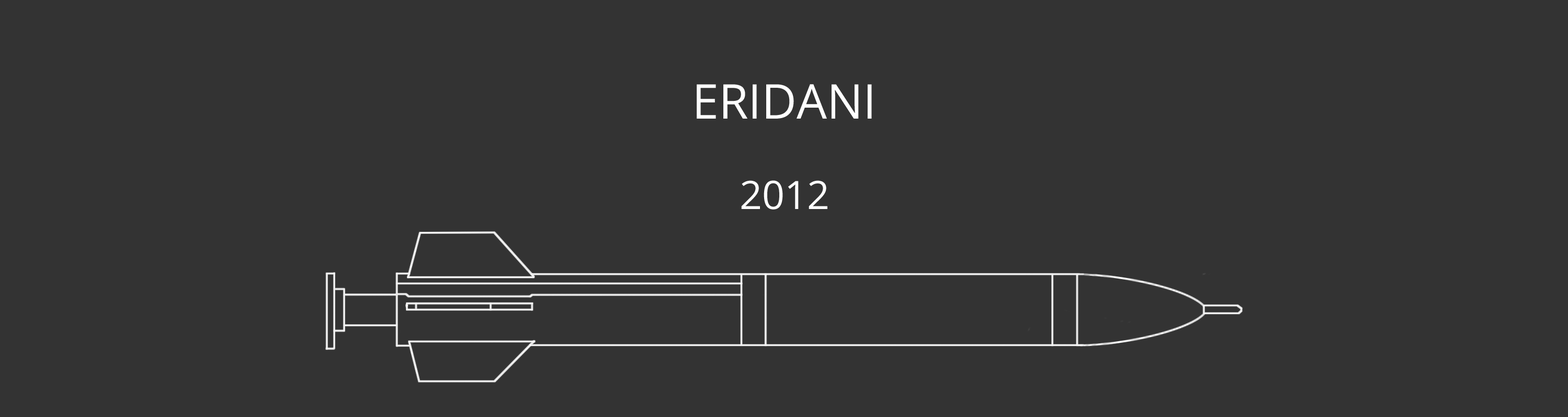
<style>
.page{position:relative;width:1568px;height:417px;background:#333333}
.page>*{position:absolute;margin:0}
.t1{font:47.9px "OpenSans";color:#ffffff}
.t2{font:39.2px "OpenSans";color:#ffffff}
</style>
<div class="page">
<p class="t1" style="left:697px;top:84px;width:175px;height:35px">ERIDANI</p>
<p class="t2" style="left:741px;top:180px;width:86px;height:30px">2012</p>
</div>
